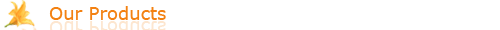
<style>
.page{position:relative;width:500px;height:30px;background:#ffffff}
.page>*{position:absolute;margin:0}
.t1{font:18px "Verdana";color:#f38111}
</style>
<div class="page">
<p class="t1" style="left:49px;top:6px;width:117px;height:14px">Our Products</p>
</div>
